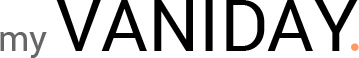
<style>
.page{position:relative;width:359px;height:58px;background:#ffffff}
.page>*{position:absolute;margin:0}
.t1{font:72px "Roboto-Regular";color:#000000}
.t2{font:36px "Roboto-Regular";color:#666666}
</style>
<div class="page">
<p class="t1" style="left:0px;top:0px;width:358px;height:58px"><span class="t2">my </span>VANIDAY</p>
</div>
